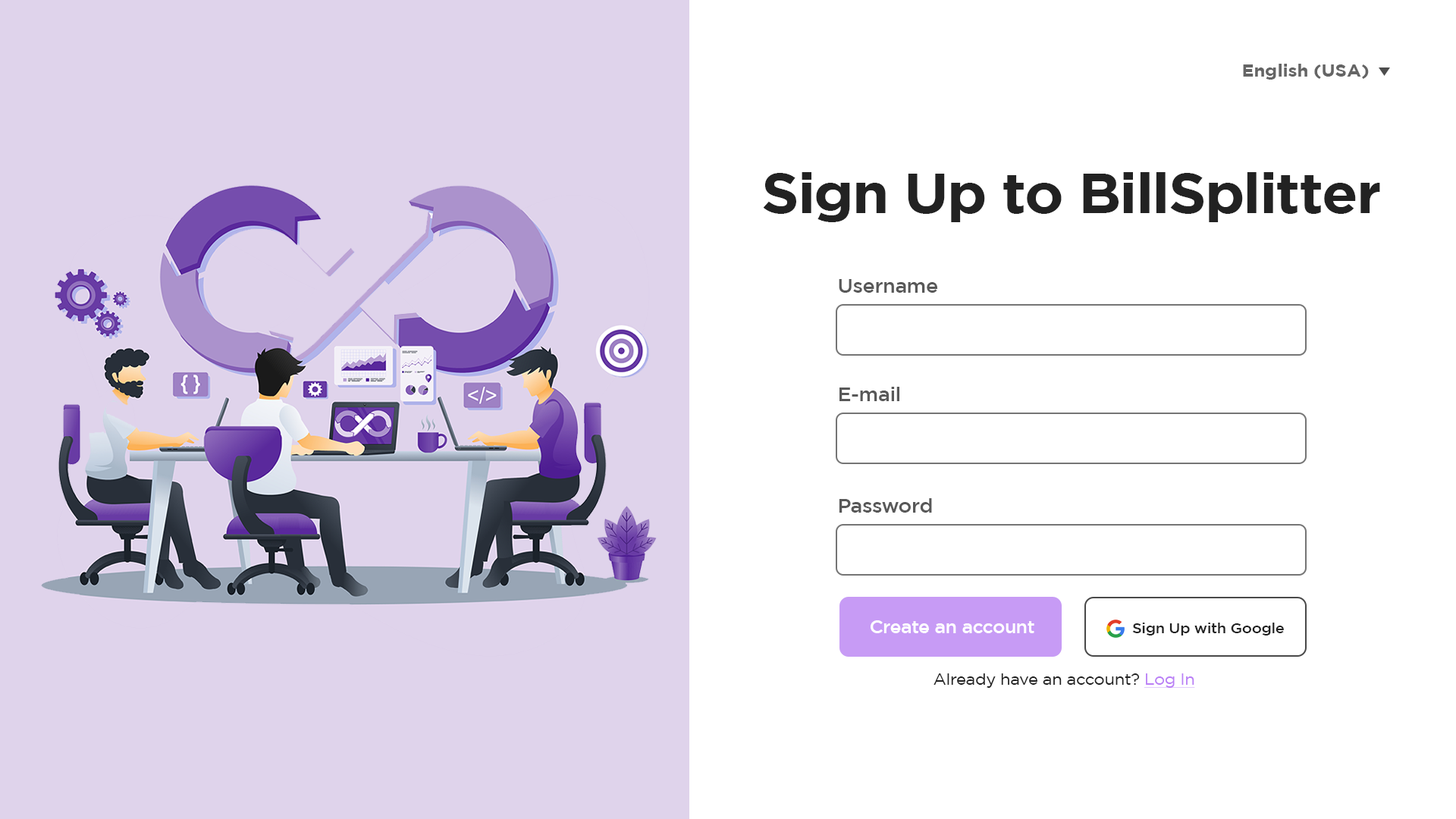
<style>
.page{position:relative;width:1456px;height:819px;background:#ffffff}
.page>*{position:absolute;margin:0}
.t1{font:17.5px "Gotham-Bold";letter-spacing:-0.01em;color:#656565;scale:1.05 1}
.t2{font:17.5px "Gotham-Bold";letter-spacing:-0.01em;color:#656565;text-transform:uppercase;scale:1.05 1}
.t3{font:56.2px "Gotham-Bold";letter-spacing:-0.025em;color:#222222;scale:1.05 1}
.t4{font:19.8px "Gotham-Medium";letter-spacing:-0.025em;color:#585858;scale:1.05 1}
.t5{font:18.1px "Gotham-Medium";letter-spacing:-0.025em;color:#ffffff;scale:1.05 1}
.t6{font:14.6px "Gotham-Medium";letter-spacing:-0.025em;color:#212121;scale:1.05 1}
.t7{font:16.1px "Gotham-Book";letter-spacing:-0.025em;color:#222222;scale:1.05 1}
.t8{font:16.1px "Gotham-Book";letter-spacing:-0.025em;color:#ba7ff6;text-decoration:underline;scale:1.05 1}
</style>
<div class="page">
<p class="t1" style="left:1243px;top:64px;width:126px;height:16px">English<span class="t2"> (USA)</span></p>
<p class="t3" style="left:763px;top:172px;width:617px;height:50px">Sign Up to BillSplitter</p>
<p class="t4" style="left:839px;top:279px;width:99px;height:14px">Username</p>
<p class="t4" style="left:839px;top:387px;width:60px;height:14px">E-mail</p>
<p class="t4" style="left:839px;top:498px;width:93px;height:15px">Password</p>
<p class="t5" style="left:871px;top:620px;width:163px;height:13px">Create an account</p>
<p class="t6" style="left:1132px;top:623px;width:152px;height:12px">Sign Up with Google</p>
<p class="t7" style="left:933px;top:673px;width:262px;height:15px">Already have an account? <span class="t8">Log In</span></p>
</div>
